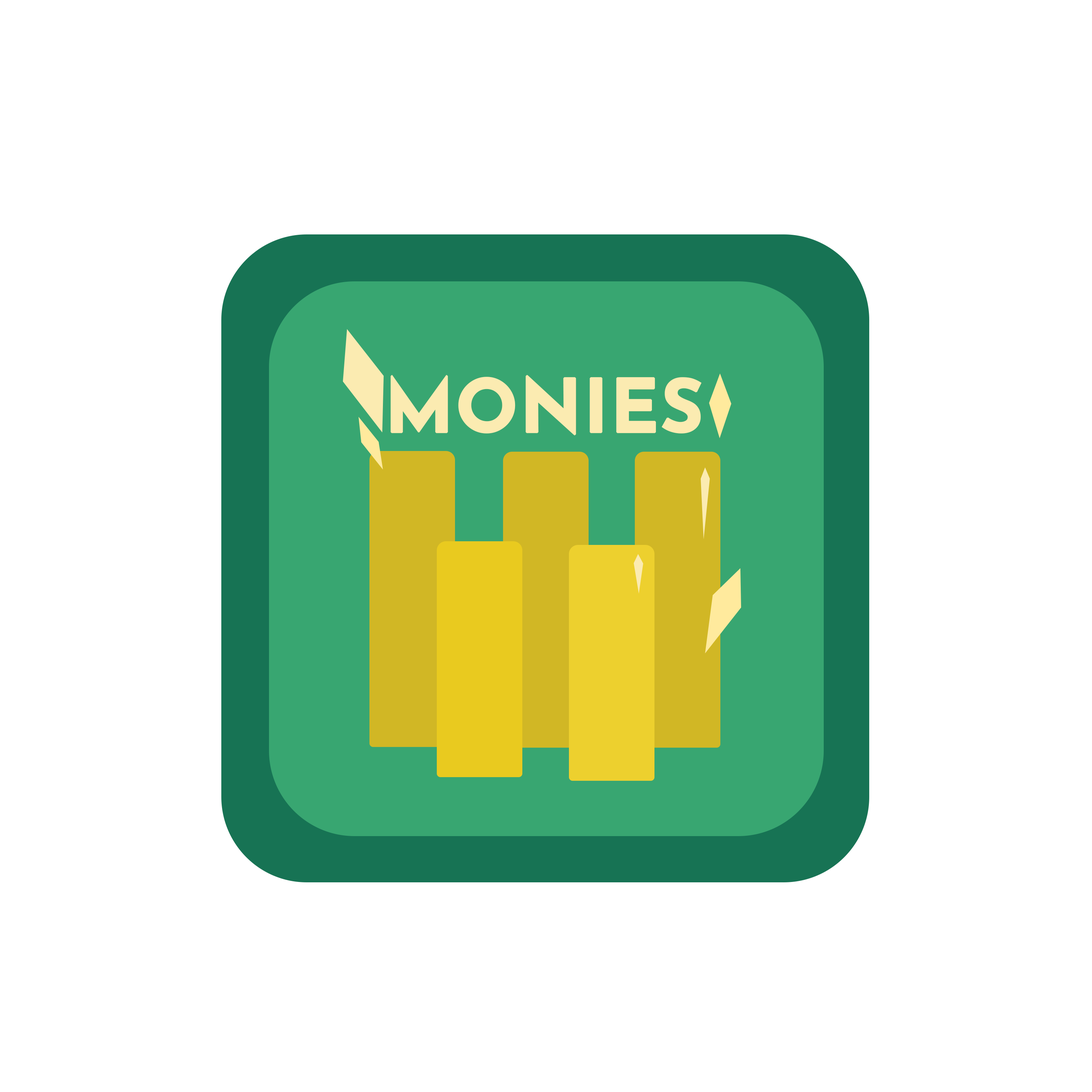
<style>
.page{position:relative;width:1092px;height:1092px;background:#ffffff}
.page>*{position:absolute;margin:0}
.t1{font:72.8px "JosefinSans-Bold";color:#fbebb1;text-transform:uppercase;font-weight:bold}
</style>
<div class="page">
<p class="t1" style="left:391px;top:375px;width:311px;height:60px">monies</p>
</div>
